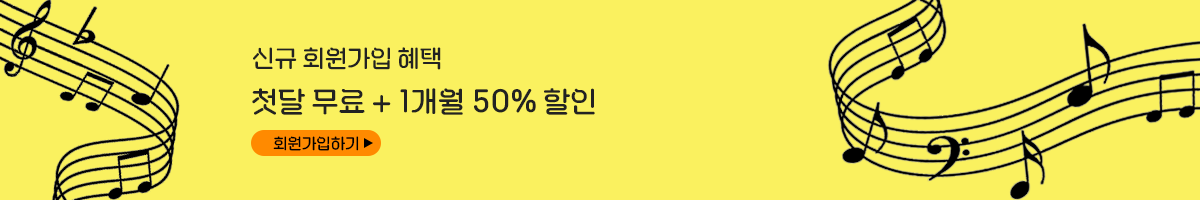
<style>
.page{position:relative;width:1200px;height:200px;background:#faf15f}
.page>*{position:absolute;margin:0}
.t1{font:25px "seolleimcool-SemiBold";color:#222222}
.t2{font:30px "seolleimcool-SemiBold";color:#222222}
.t3{font:16px "seolleimcool-SemiBold";color:#000000}
</style>
<div class="page">
<p class="t1" style="left:253px;top:47px;width:188px;height:23px">신규 회원가입 혜택</p>
<p class="t2" style="left:252px;top:88px;width:343px;height:27px">첫달 무료 + 1개월 50% 할인</p>
<p class="t3" style="left:273px;top:136px;width:86px;height:15px">회원가입하기</p>
</div>
